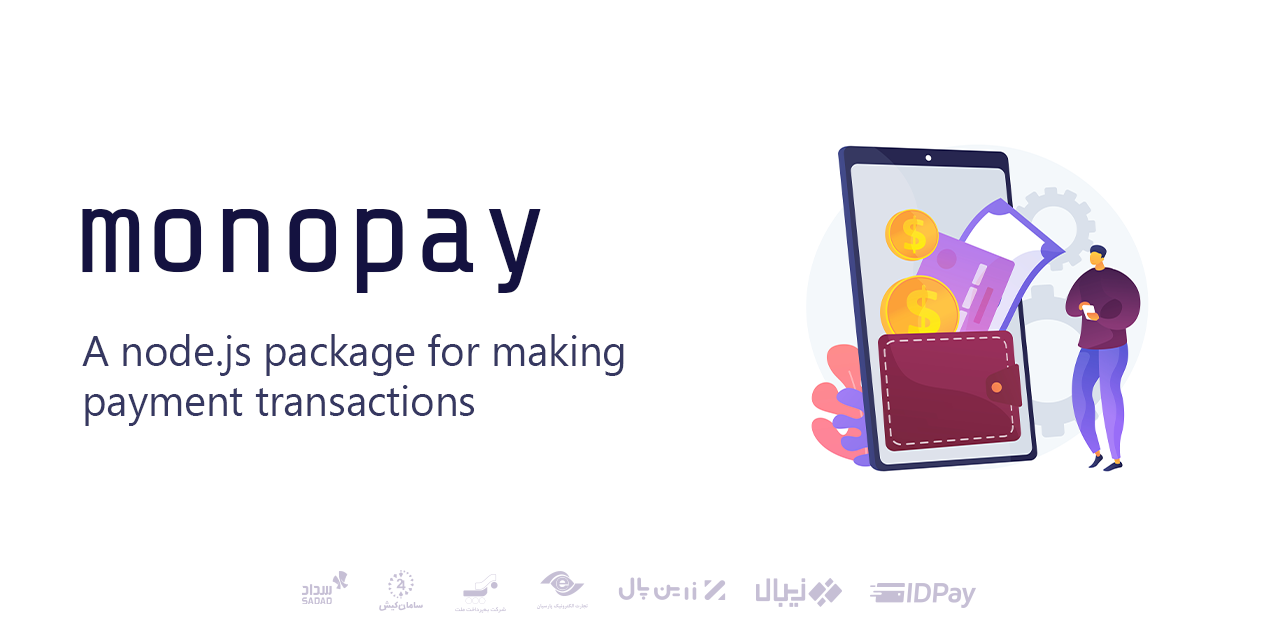
<style>
.page{position:relative;width:1280px;height:640px;background:#ffffff}
.page>*{position:absolute;margin:0}
.t1{font:125px "ShareTechMono-Regular";color:#141240}
.t2{font:41.7px "SegoeUI";color:#363861}
</style>
<div class="page">
<p class="t1" style="left:82px;top:209px;width:459px;height:84px">monopay</p>
<p class="t2" style="left:82px;top:334px;width:542px;height:92px">A node.js package for making payment transactions</p>
</div>
